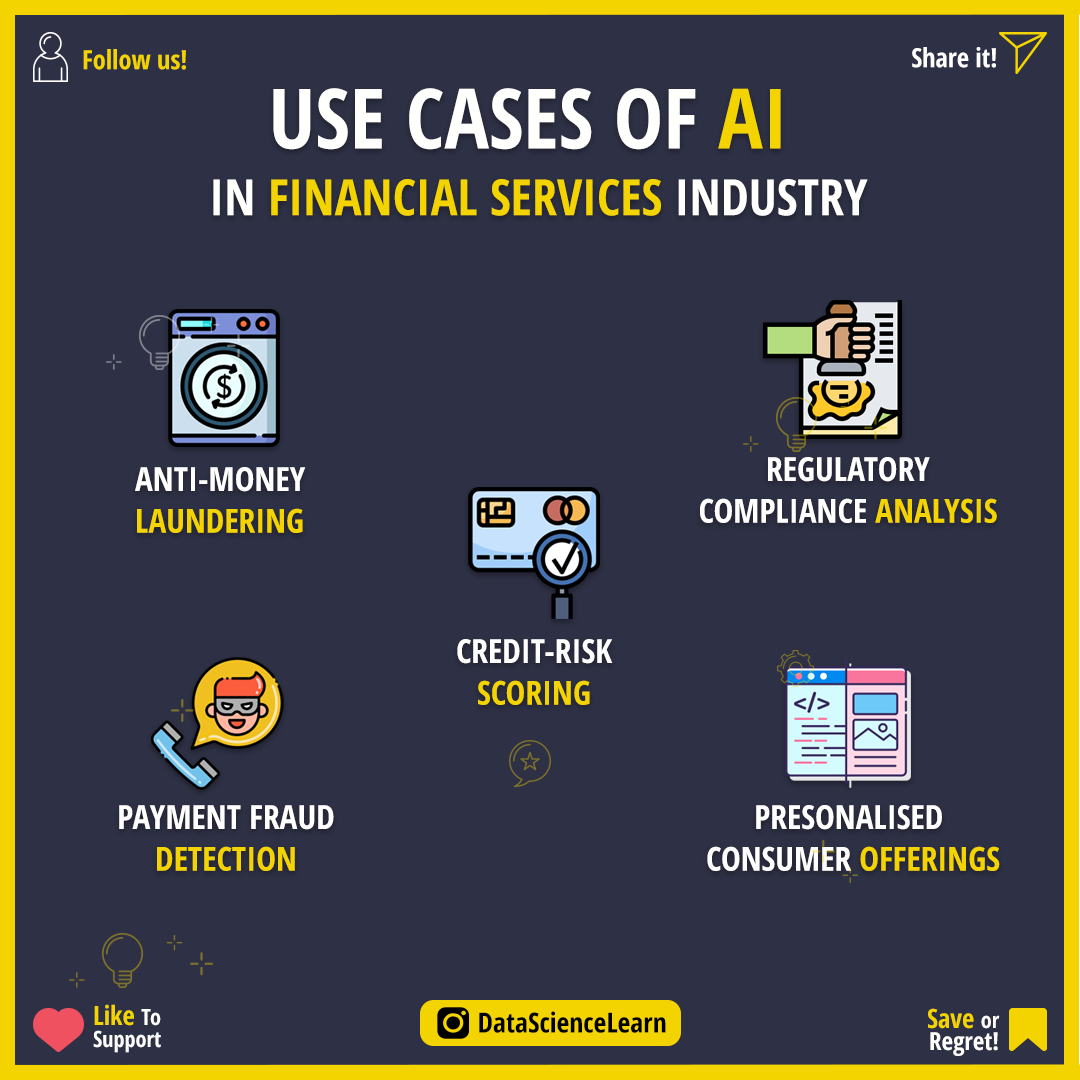
<style>
.page{position:relative;width:1080px;height:1080px;background:#2e3045}
.page>*{position:absolute;margin:0}
.t1{font:26.4px "OpenSans-CondensedBold";color:#f3d400}
.t2{font:26.4px "OpenSans-CondensedBold";color:#ffffff}
.t3{font:50px/66.7px "OpenSans-CondensedBold";color:#f3d400}
.t4{font:83.3px/66.7px "OpenSans-CondensedBold";color:#fffffe}
.t5{font:83.3px/66.7px "OpenSans-CondensedBold";color:#f3d400}
.t6{font:50px/66.7px "OpenSans-CondensedBold";color:#fffffe}
.t7{font:33.3px/41.7px "OpenSans-CondensedBold";color:#ffffff}
.t8{font:33.3px/41.7px "OpenSans-CondensedBold";color:#f3d400}
.t9{font:22.2px/22.2px "OpenSans-CondensedBold";color:#ffffff}
.t10{font:26.4px/22.2px "OpenSans-CondensedBold";color:#f3d400}
.t11{font:27.8px "OpenSans-CondensedBold";color:#000000}
.t12{font:25px/22.2px "OpenSans-CondensedBold";color:#ffffff}
</style>
<div class="page">
<p class="t1" style="left:83px;top:49px;width:103px;height:21px">Follow us!</p>
<p class="t2" style="left:912px;top:47px;width:84px;height:21px">Share it!</p>
<p class="t3" style="left:213px;top:88px;width:655px;height:128px;text-align:center"><span class="t4">USE CASES OF </span><span class="t5">AI <br></span><span class="t6">IN </span>FINANCIAL SERVICES <span class="t6">INDUSTRY</span></p>
<p class="t7" style="left:700px;top:457px;width:297px;height:66px;text-align:center">REGULATORY<br>COMPLIANCE <span class="t8">ANALYSIS</span></p>
<p class="t7" style="left:135px;top:467px;width:171px;height:66px">ANTI-MONEY<br><span class="t8">LAUNDERING</span></p>
<p class="t7" style="left:457px;top:639px;width:156px;height:66px;text-align:center">CREDIT-RISK<br><span class="t8">SCORING</span></p>
<p class="t7" style="left:119px;top:805px;width:215px;height:66px;text-align:center">PAYMENT FRAUD<br><span class="t8">DETECTION</span></p>
<p class="t7" style="left:707px;top:805px;width:293px;height:66px;text-align:center">PRESONALISED <br>CONSUMER <span class="t8">OFFERINGS</span></p>
<p class="t9" style="left:93px;top:1004px;width:68px;height:49px"><span class="t10">Like </span>To<br>Support</p>
<p class="t11" style="left:479px;top:1011px;width:187px;height:22px">DataScienceLearn</p>
<p class="t12" style="left:928px;top:1008px;width:72px;height:48px;text-align:right"><span class="t10">Save </span><span class="t9">or<br></span>Regret!</p>
</div>
